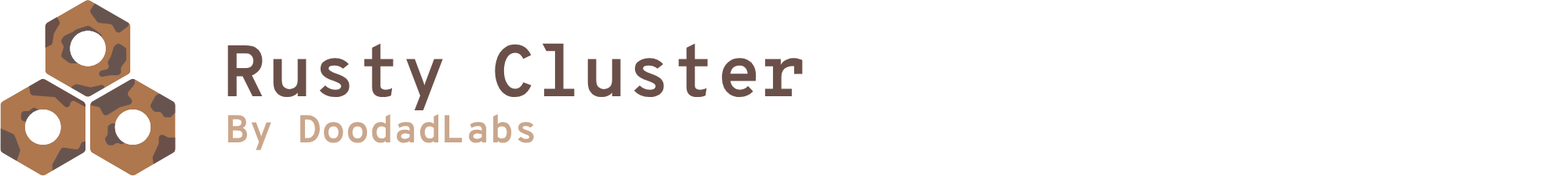
<style>
.page{position:relative;width:1568px;height:176px;background:#ffffff}
.page>*{position:absolute;margin:0}
.t1{font:72.9px "OverpassMono-Bold";color:#6b5049}
.t2{font:39.1px "OverpassMono-Bold";color:#caa68b}
</style>
<div class="page">
<p class="t1" style="left:227px;top:43px;width:576px;height:68px">Rusty Cluster</p>
<p class="t2" style="left:228px;top:114px;width:306px;height:37px">By DoodadLabs</p>
</div>
